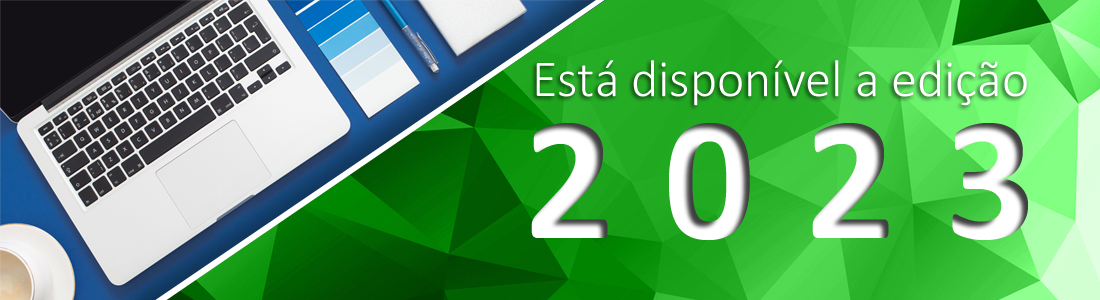
<style>
.page{position:relative;width:1100px;height:300px}
.page>*{position:absolute;margin:0}
.t1{font:52.2px "Calibri-Light";color:#ffffff}
.t2{font:178.7px "Calibri-Bold";letter-spacing:0.28em;color:#ffffff}
</style>
<div class="page">
<p class="t1" style="left:536px;top:60px;width:491px;height:46px">Está disponível a edição</p>
<p class="t2" style="left:531px;top:123px;width:497px;height:118px">2023</p>
</div>
